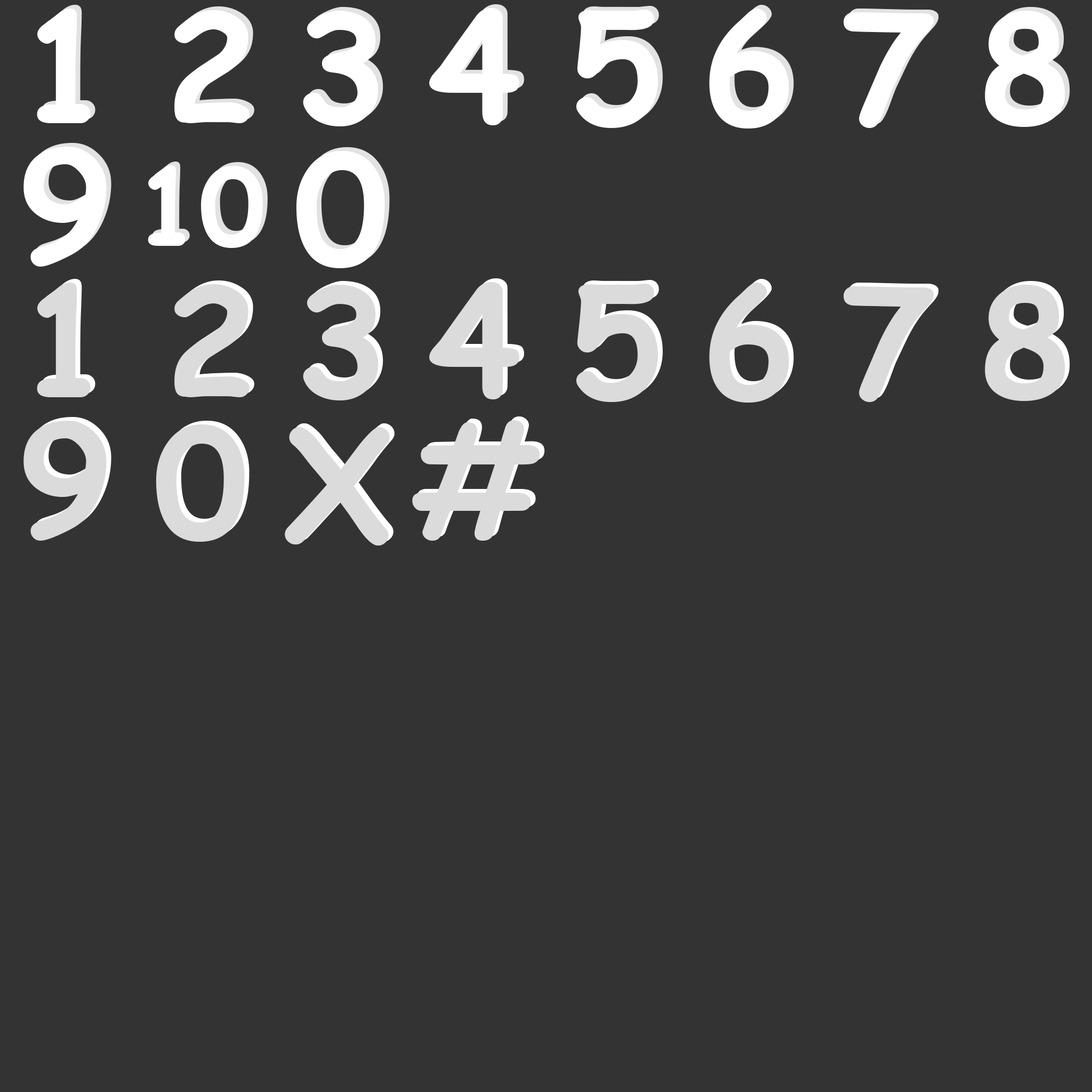
<style>
.page{position:relative;width:1092px;height:1092px;background:#333333}
.page>*{position:absolute;margin:0}
.t1{font:151.1px "ComicSansMS-Bold";color:#ffffff}
.t2{font:105.4px "ComicSansMS-Bold";color:#ffffff}
.t3{font:151.1px "ComicSansMS-Bold";color:#dbdbdb}
</style>
<div class="page">
<p class="t1" style="left:42px;top:5px;width:53px;height:114px">1</p>
<p class="t1" style="left:434px;top:4px;width:90px;height:118px">4</p>
<p class="t1" style="left:581px;top:6px;width:82px;height:118px">5</p>
<p class="t1" style="left:714px;top:5px;width:80px;height:120px">6</p>
<p class="t1" style="left:37px;top:9px;width:54px;height:114px">1</p>
<p class="t1" style="left:174px;top:10px;width:76px;height:113px">2</p>
<p class="t1" style="left:179px;top:6px;width:75px;height:113px">2</p>
<p class="t1" style="left:303px;top:11px;width:76px;height:115px">3</p>
<p class="t1" style="left:308px;top:7px;width:75px;height:116px">3</p>
<p class="t1" style="left:429px;top:8px;width:90px;height:117px">4</p>
<p class="t1" style="left:576px;top:10px;width:82px;height:118px">5</p>
<p class="t1" style="left:709px;top:9px;width:80px;height:120px">6</p>
<p class="t1" style="left:844px;top:12px;width:90px;height:116px">7</p>
<p class="t1" style="left:848px;top:9px;width:90px;height:115px">7</p>
<p class="t1" style="left:985px;top:11px;width:80px;height:116px">8</p>
<p class="t1" style="left:990px;top:7px;width:80px;height:116px">8</p>
<p class="t1" style="left:23px;top:147px;width:84px;height:120px">9</p>
<p class="t1" style="left:28px;top:143px;width:83px;height:120px">9</p>
<p class="t1" style="left:301px;top:147px;width:89px;height:117px">0</p>
<p class="t2" style="left:152px;top:162px;width:116px;height:82px">10</p>
<p class="t1" style="left:296px;top:151px;width:89px;height:117px">0</p>
<p class="t2" style="left:148px;top:165px;width:115px;height:83px">10</p>
<p class="t3" style="left:42px;top:279px;width:53px;height:114px">1</p>
<p class="t3" style="left:179px;top:280px;width:75px;height:113px">2</p>
<p class="t3" style="left:308px;top:281px;width:75px;height:116px">3</p>
<p class="t3" style="left:434px;top:278px;width:90px;height:118px">4</p>
<p class="t3" style="left:581px;top:280px;width:82px;height:118px">5</p>
<p class="t3" style="left:714px;top:279px;width:80px;height:120px">6</p>
<p class="t3" style="left:990px;top:281px;width:80px;height:116px">8</p>
<p class="t3" style="left:37px;top:283px;width:54px;height:114px">1</p>
<p class="t3" style="left:174px;top:284px;width:76px;height:113px">2</p>
<p class="t3" style="left:303px;top:285px;width:76px;height:115px">3</p>
<p class="t3" style="left:429px;top:282px;width:90px;height:117px">4</p>
<p class="t3" style="left:576px;top:284px;width:82px;height:118px">5</p>
<p class="t3" style="left:709px;top:283px;width:80px;height:120px">6</p>
<p class="t3" style="left:844px;top:286px;width:90px;height:116px">7</p>
<p class="t3" style="left:848px;top:283px;width:90px;height:115px">7</p>
<p class="t3" style="left:985px;top:285px;width:80px;height:116px">8</p>
<p class="t3" style="left:23px;top:421px;width:84px;height:120px">9</p>
<p class="t3" style="left:28px;top:417px;width:83px;height:120px">9</p>
<p class="t3" style="left:156px;top:424px;width:89px;height:118px">0</p>
<p class="t3" style="left:160px;top:421px;width:90px;height:117px">0</p>
<p class="t3" style="left:290px;top:423px;width:105px;height:119px">X</p>
<p class="t3" style="left:290px;top:423px;width:105px;height:119px">X</p>
<p class="t3" style="left:412px;top:420px;width:128px;height:121px">#</p>
<p class="t3" style="left:417px;top:416px;width:128px;height:121px">#</p>
<p class="t3" style="left:285px;top:427px;width:105px;height:118px">X</p>
<p class="t3" style="left:285px;top:427px;width:105px;height:118px">X</p>
</div>
